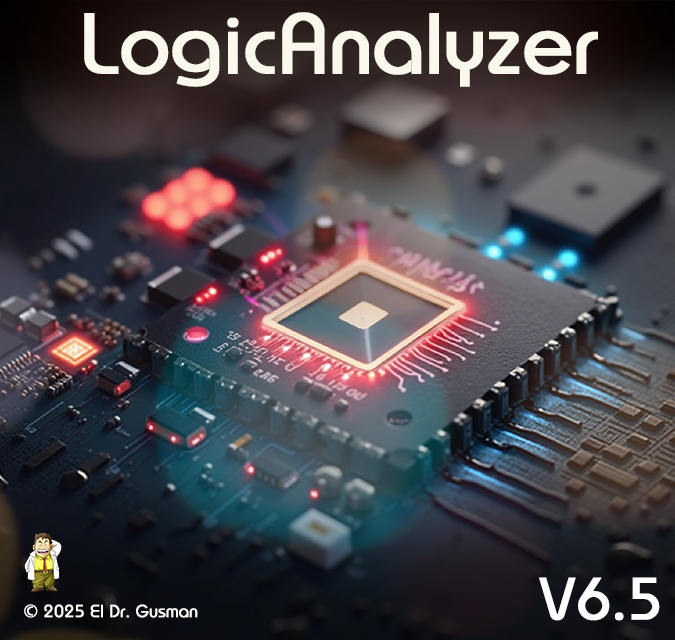
<style>
.page{position:relative;width:675px;height:640px}
.page>*{position:absolute;margin:0}
.t1{font:78.9px "Belgium";color:#ffffff;font-weight:bold}
.t2{font:54.8px "Belgium";color:#ffffff;font-weight:bold}
.t3{font:16.2px "Belgium";color:#ffffff;font-weight:bold}
</style>
<div class="page">
<p class="t1" style="left:84px;top:12px;width:514px;height:75px">LogicAnalyzer</p>
<p class="t2" style="left:539px;top:577px;width:121px;height:44px">V6.5</p>
<p class="t3" style="left:24px;top:604px;width:174px;height:14px">© 2025 El Dr. Gusman</p>
</div>
